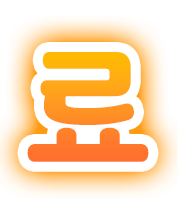
<style>
.page{position:relative;width:178px;height:214px;background:#ffffff}
.page>*{position:absolute;margin:0}
.t1{font:146.7px "Binggrae-Bold";text-transform:uppercase;scale:0.91 1}
</style>
<div class="page">
<p class="t1" style="left:27px;top:52px;width:122px;height:110px">료</p>
</div>
